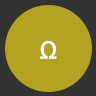
<style>
.page{position:relative;width:96px;height:96px;background:#b3a320}
.page>*{position:absolute;margin:0}
.t1{font:24px "ArialMT";letter-spacing:0.01em;color:#ffffff;font-weight:bold}
</style>
<div class="page">
<p class="t1" style="left:40px;top:41px;width:17px;height:18px">Ω</p>
</div>
